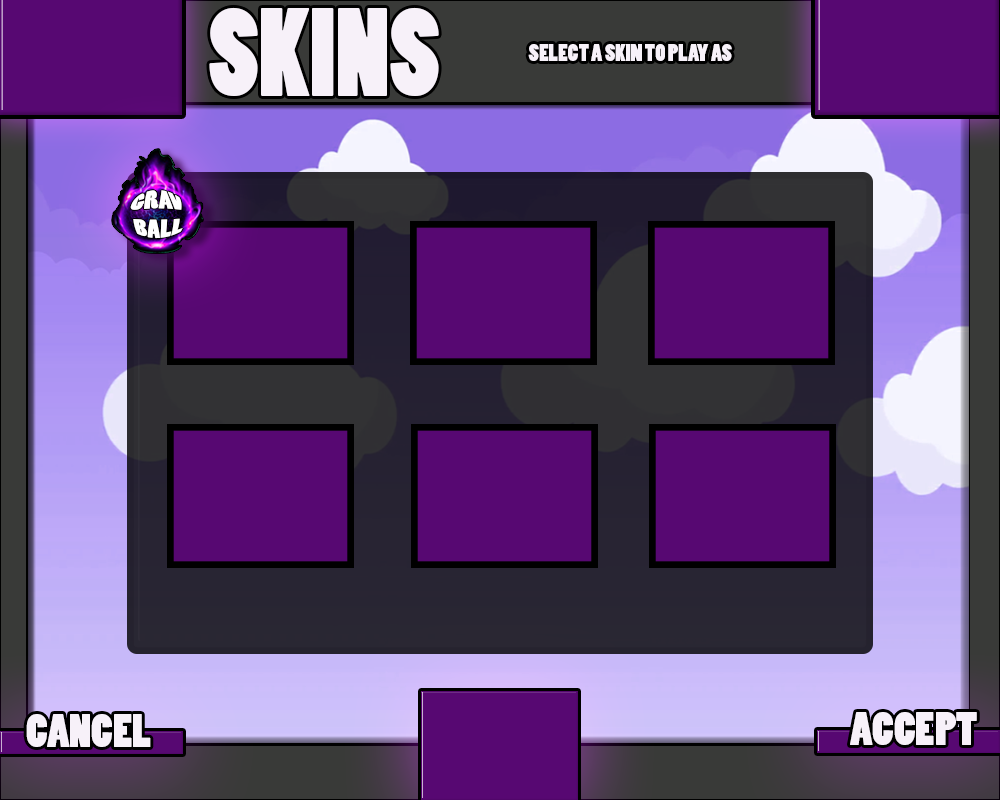
<style>
.page{position:relative;width:1000px;height:800px;background:#570872}
.page>*{position:absolute;margin:0}
.t1{font:117.7px "PoplarStd";color:#f7f1f9;scale:0.94 1}
.t2{font:22px "PoplarStd";color:#f7f1f9;scale:1.03 1}
.t3{font:17.5px "PoplarStd";color:#fefbff;scale:1.23 1}
.t4{font:44.1px "PoplarStd";color:#f7f1f9;scale:1.03 1}
</style>
<div class="page">
<p class="t1" style="left:209px;top:7px;width:230px;height:89px">SKINS</p>
<p class="t2" style="left:528px;top:44px;width:204px;height:17px">SELECT A SKIN TO PLAY AS</p>
<p class="t3" style="left:130px;top:190px;width:53px;height:49px">GRAV<br>BALL</p>
<p class="t4" style="left:850px;top:712px;width:127px;height:33px">ACCEPT</p>
<p class="t4" style="left:26px;top:714px;width:125px;height:33px">CANCEL</p>
</div>
